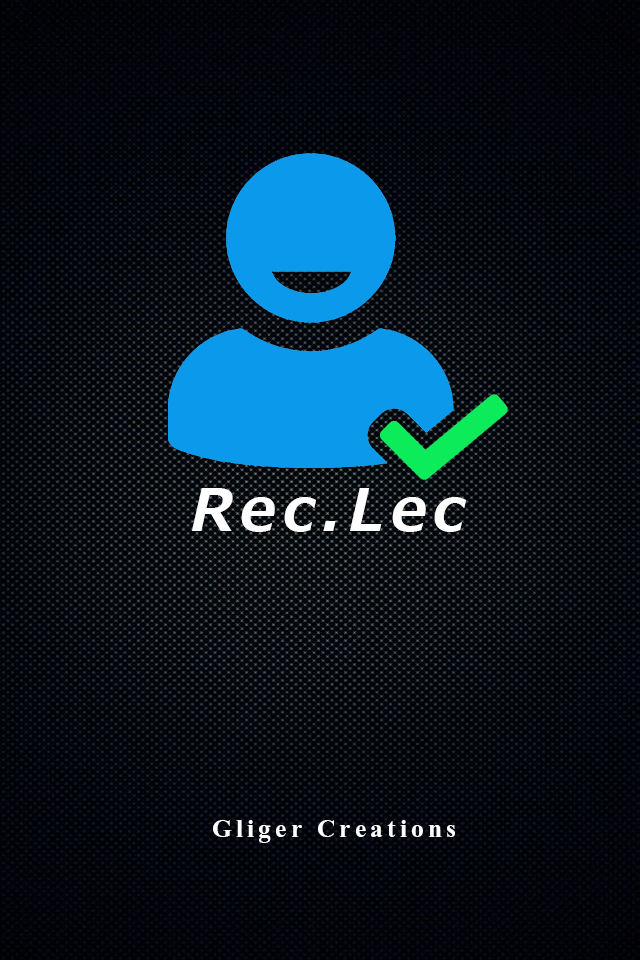
<style>
.page{position:relative;width:640px;height:960px}
.page>*{position:absolute;margin:0}
.t1{font:58.3px "Meiryo-BoldItalic";letter-spacing:0.12em;color:#ffffff}
.t2{font:33.3px "Kokila-Bold";letter-spacing:0.12em;color:#ffffff}
</style>
<div class="page">
<p class="t1" style="left:192px;top:488px;width:274px;height:44px">Rec.Lec</p>
<p class="t2" style="left:213px;top:820px;width:242px;height:23px">Gliger Creations</p>
</div>
